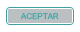
<style>
.page{position:relative;width:80px;height:32px;background:#ffffff}
.page>*{position:absolute;margin:0}
.t1{font:8px "MicrosoftSansSerif";color:#40a0a2}
</style>
<div class="page">
<p class="t1" style="left:21px;top:13px;width:37px;height:7px">ACEPTAR</p>
</div>
